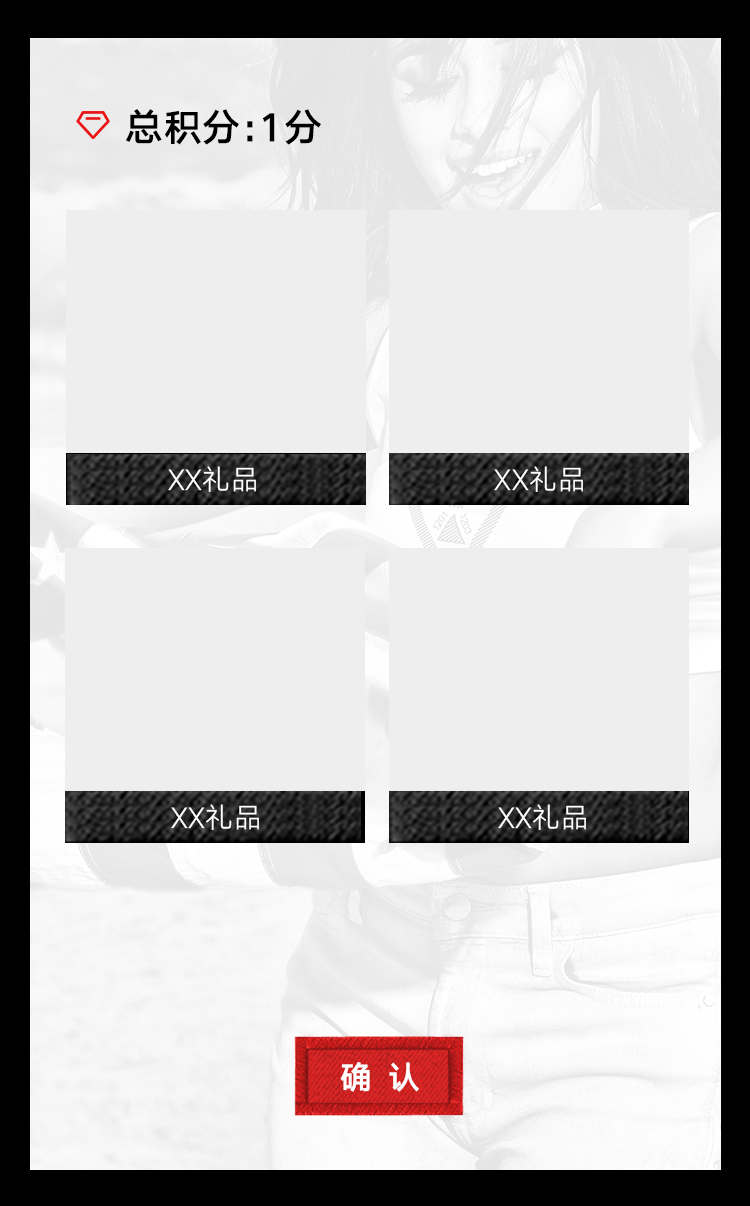
<style>
.page{position:relative;width:750px;height:1206px;background:#eeeeee}
.page>*{position:absolute;margin:0}
.t1{font:38px "HYQiHei-GZS";letter-spacing:0.02em;color:#000000}
.t2{font:38px "HYQiHei-GZS";letter-spacing:-0.08em;color:#000000}
.t3{font:38px "HYQiHei-GZS";letter-spacing:-0.44em;color:#000000}
.t4{font:28px "HYQiHei-DES";letter-spacing:0.02em;color:#ffffff}
</style>
<div class="page">
<p class="t1" style="left:125px;top:109px;width:196px;height:36px">总积<span class="t2">分</span><span class="t3">：</span>1分</p>
<p class="t4" style="left:168px;top:466px;width:88px;height:26px">XX礼品</p>
<p class="t4" style="left:494px;top:466px;width:89px;height:26px">XX礼品</p>
<p class="t4" style="left:171px;top:804px;width:88px;height:26px">XX礼品</p>
<p class="t4" style="left:498px;top:804px;width:88px;height:26px">XX礼品</p>
</div>
